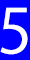
<style>
.page{position:relative;width:30px;height:60px;background:#0000ff}
.page>*{position:absolute;margin:0}
.t1{font:60.7px "KozGoPr6N-Regular";color:#ffffff}
</style>
<div class="page">
<p class="t1" style="left:0px;top:7px;width:28px;height:48px">5</p>
</div>
